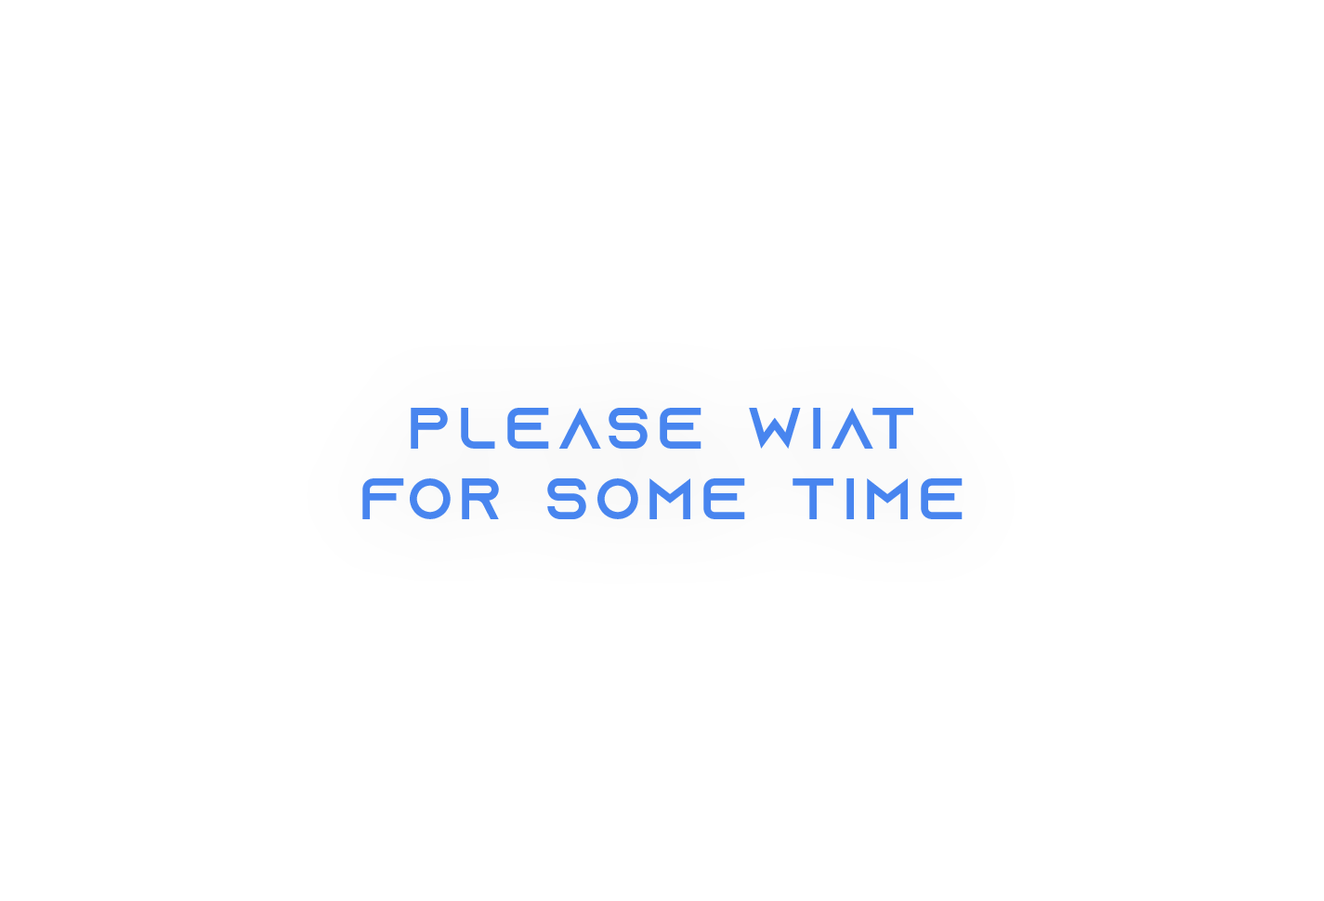
<style>
.page{position:relative;width:1324px;height:901px;background:#ffffff}
.page>*{position:absolute;margin:0}
.t1{font:58.5px "AzonixRegular";letter-spacing:0.12em;color:#4885ef;text-transform:uppercase}
</style>
<div class="page">
<p class="t1" style="left:362px;top:408px;width:600px;height:111px;text-align:center">Please Wiat<br>For Some Time</p>
</div>
